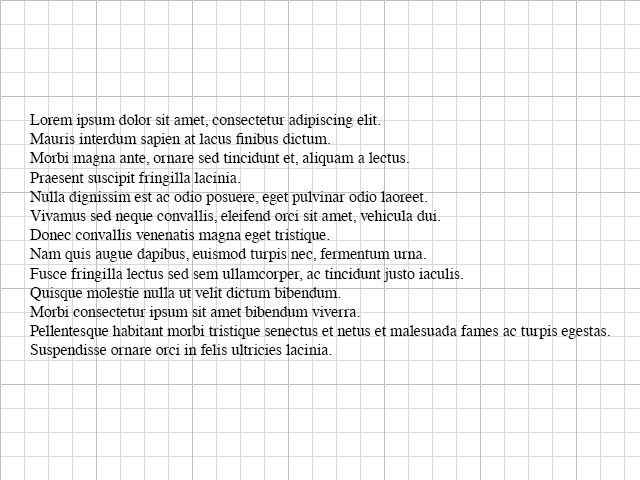
<style>
.page{position:relative;width:640px;height:480px;background:#ffffff}
.page>*{position:absolute;margin:0}
.t1{font:16px "Times-Roman";color:#000000}
</style>
<div class="page">
<p class="t1" style="left:30px;top:114px;width:580px;height:244px">Lorem ipsum dolor sit amet, consectetur adipiscing elit.<br>Mauris interdum sapien at lacus finibus dictum.<br>Morbi magna ante, ornare sed tincidunt et, aliquam a lectus.<br>Praesent suscipit fringilla lacinia.<br>Nulla dignissim est ac odio posuere, eget pulvinar odio laoreet.<br>Vivamus sed neque convallis, eleifend orci sit amet, vehicula dui.<br>Donec convallis venenatis magna eget tristique.<br>Nam quis augue dapibus, euismod turpis nec, fermentum urna.<br>Fusce fringilla lectus sed sem ullamcorper, ac tincidunt justo iaculis.<br>Quisque molestie nulla ut velit dictum bibendum.<br>Morbi consectetur ipsum sit amet bibendum viverra.<br>Pellentesque habitant morbi tristique senectus et netus et malesuada fames ac turpis egestas.<br>Suspendisse ornare orci in felis ultricies lacinia.</p>
</div>
